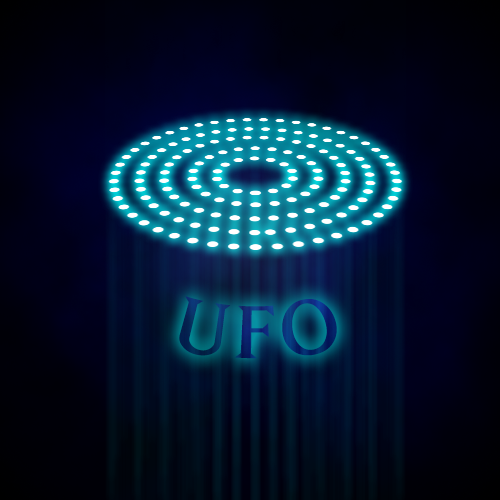
<style>
.page{position:relative;width:500px;height:500px}
.page>*{position:absolute;margin:0}
.t1{font:72px "HYcysM";letter-spacing:-0.05em}
</style>
<div class="page">
<p class="t1" style="left:179px;top:296px;width:158px;height:63px">UFO</p>
</div>
